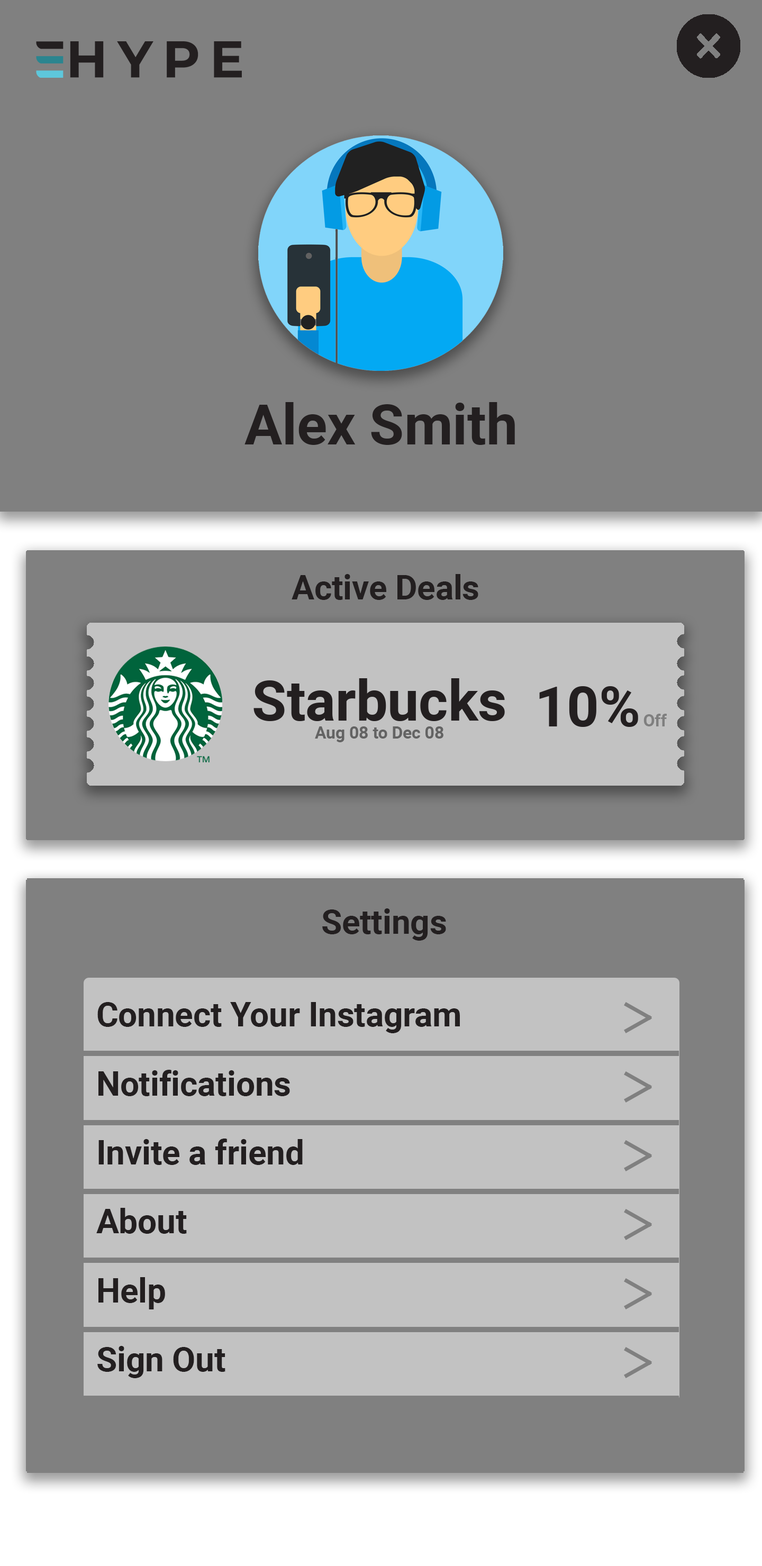
<style>
.page{position:relative;width:762px;height:1566px;background:#808080}
.page>*{position:absolute;margin:0}
.t1{font:56px "Roboto-Bold";color:#231f20}
.t2{font:33.6px "Roboto-Bold";color:#231f20}
</style>
<div class="page">
<p class="t1" style="left:244px;top:402px;width:271px;height:43px">Alex Smith</p>
<p class="t2" style="left:291px;top:574px;width:187px;height:26px">Active Deals</p>
<p class="t2" style="left:322px;top:908px;width:124px;height:32px">Settings</p>
<p class="t2" style="left:97px;top:1002px;width:363px;height:31px">Connect Your Instagram</p>
<p class="t2" style="left:98px;top:1069px;width:192px;height:27px">Notifications</p>
<p class="t2" style="left:98px;top:1138px;width:205px;height:27px">Invite a friend</p>
<p class="t2" style="left:96px;top:1208px;width:91px;height:25px">About</p>
<p class="t2" style="left:98px;top:1277px;width:67px;height:32px">Help</p>
<p class="t2" style="left:97px;top:1346px;width:128px;height:32px">Sign Out</p>
</div>
